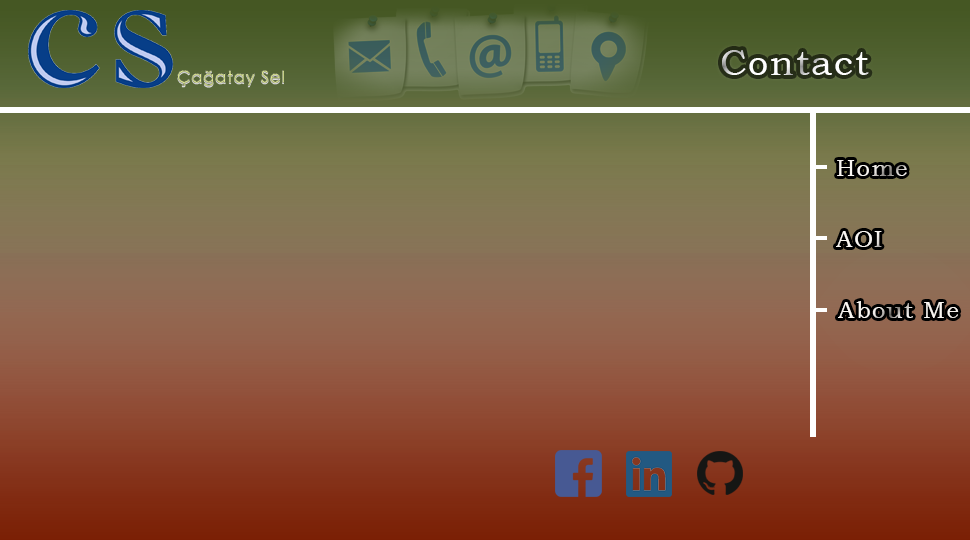
<style>
.page{position:relative;width:970px;height:540px}
.page>*{position:absolute;margin:0}
.t1{font:36px "BookmanOldStyle";letter-spacing:0.05em;color:#ffffff}
.t2{font:24px "BookmanOldStyle";letter-spacing:0.05em}
.t3{font:24px "BookmanOldStyle";letter-spacing:0.05em;color:#f9f6f2}
.t4{font:24px "BookmanOldStyle";letter-spacing:0.05em;color:#f9f5f2}
</style>
<div class="page">
<p class="t1" style="left:722px;top:50px;width:147px;height:25px">Contact</p>
<p class="t2" style="left:837px;top:160px;width:70px;height:16px">Home</p>
<p class="t3" style="left:836px;top:231px;width:46px;height:16px">AOI</p>
<p class="t4" style="left:838px;top:301px;width:121px;height:17px">About Me</p>
</div>
